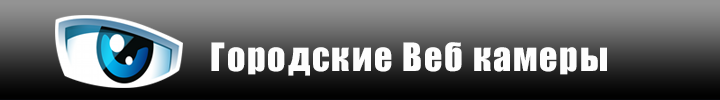
<style>
.page{position:relative;width:720px;height:100px}
.page>*{position:absolute;margin:0}
.t1{font:36px "Impact";letter-spacing:0.05em;color:#212324}
</style>
<div class="page">
<p class="t1" style="left:211px;top:42px;width:396px;height:34px">Городские Веб камеры</p>
</div>
